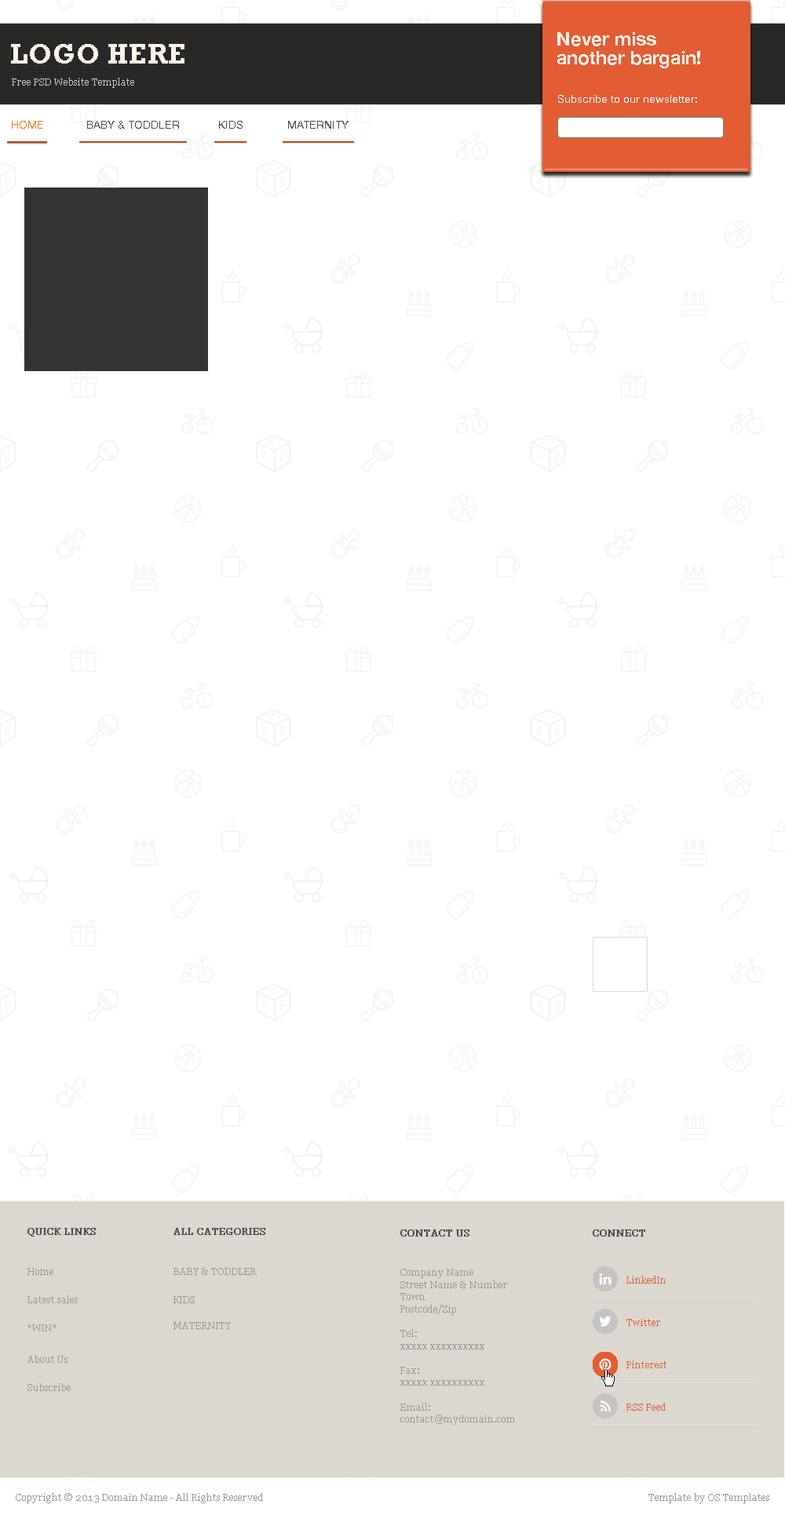
<style>
.page{position:relative;width:785px;height:1519px;background:#ffffff}
.page>*{position:absolute;margin:0}
.t1{font:18.8px/18.8px "HelveticaNeue-Bold";color:#fff2e7}
.t2{font:28.3px "Rockwell-Bold";color:#fff2e7}
.t3{font:9.4px "Georgia";color:#d0cabf}
.t4{font:11px "HelveticaNeue";color:#ffffff}
.t5{font:11px "HelveticaNeue";color:#ea7d24}
.t6{font:11px "HelveticaNeue";color:#434954}
.t7{font:9.4px "Georgia";color:#4b4d52;font-weight:bold}
.t8{font:9.4px "Georgia";color:#979797}
.t9{font:9.4px/12.2px "Georgia";color:#979797}
.t10{font:9.4px "Georgia";color:#e25d33}
</style>
<div class="page">
<p class="t1" style="left:557px;top:32px;width:143px;height:36px">Never miss <br>another bargain!</p>
<p class="t2" style="left:11px;top:44px;width:173px;height:20px">LOGO HERE</p>
<p class="t3" style="left:12px;top:78px;width:122px;height:10px">Free PSD Website Template</p>
<p class="t4" style="left:558px;top:95px;width:139px;height:8px">Subscribe to our newsletter:</p>
<p class="t5" style="left:12px;top:121px;width:31px;height:8px">HOME</p>
<p class="t6" style="left:87px;top:121px;width:92px;height:8px">BABY &amp; TODDLER</p>
<p class="t6" style="left:219px;top:121px;width:24px;height:8px">KIDS</p>
<p class="t6" style="left:288px;top:121px;width:60px;height:8px">MATERNITY</p>
<p class="t7" style="left:27px;top:1228px;width:69px;height:9px">QUICK LINKS</p>
<p class="t7" style="left:173px;top:1228px;width:92px;height:7px">ALL CATEGORIES</p>
<p class="t7" style="left:400px;top:1230px;width:69px;height:7px">CONTACT US</p>
<p class="t7" style="left:593px;top:1230px;width:52px;height:7px">CONNECT</p>
<p class="t8" style="left:27px;top:1268px;width:26px;height:7px">Home</p>
<p class="t8" style="left:173px;top:1268px;width:84px;height:7px">BABY &amp; TODDLER</p>
<p class="t9" style="left:400px;top:1269px;width:115px;height:156px">Company Name<br>Street Name &amp; Number<br>Town<br>Postcode/Zip<br><br>Tel:<br>xxxxx xxxxxxxxxx<br><br>Fax:<br>xxxxx xxxxxxxxxx<br><br>Email:<br>contact@mydomain.com</p>
<p class="t10" style="left:626px;top:1276px;width:40px;height:8px">LinkedIn</p>
<p class="t8" style="left:27px;top:1296px;width:51px;height:8px">Latest sales</p>
<p class="t8" style="left:173px;top:1297px;width:22px;height:7px">KIDS</p>
<p class="t8" style="left:27px;top:1325px;width:30px;height:7px">*WIN*</p>
<p class="t8" style="left:173px;top:1322px;width:58px;height:7px">MATERNITY</p>
<p class="t10" style="left:626px;top:1318px;width:34px;height:8px">Twitter</p>
<p class="t8" style="left:27px;top:1355px;width:40px;height:8px">About Us</p>
<p class="t8" style="left:27px;top:1384px;width:44px;height:7px">Subscribe</p>
<p class="t10" style="left:626px;top:1403px;width:40px;height:8px">RSS Feed</p>
<p class="t8" style="left:16px;top:1493px;width:247px;height:11px">Copyright © 2013 Domain Name - All Rights Reserved</p>
<p class="t8" style="left:648px;top:1493px;width:121px;height:11px">Template by OS Templates</p>
</div>
